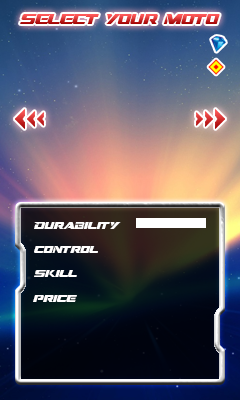
<style>
.page{position:relative;width:240px;height:400px}
.page>*{position:absolute;margin:0}
.t1{font:14px "DreamMMA"}
.t2{font:10px "DreamMMA";color:#fffefe}
</style>
<div class="page">
<p class="t1" style="left:20px;top:14px;width:200px;height:10px">select your moto</p>
<p class="t2" style="left:34px;top:222px;width:87px;height:7px">Durability</p>
<p class="t2" style="left:34px;top:246px;width:64px;height:7px">control</p>
<p class="t2" style="left:34px;top:270px;width:43px;height:7px">skill</p>
<p class="t2" style="left:33px;top:295px;width:44px;height:7px">price</p>
</div>
